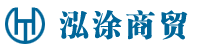
<style>
.page{position:relative;width:200px;height:50px;background:#ffffff}
.page>*{position:absolute;margin:0}
.t1{font:30px "FZCSJW--GB1-0";letter-spacing:0.1em;color:#006699}
</style>
<div class="page">
<p class="t1" style="left:59px;top:10px;width:129px;height:30px">泓涂商贸</p>
</div>
